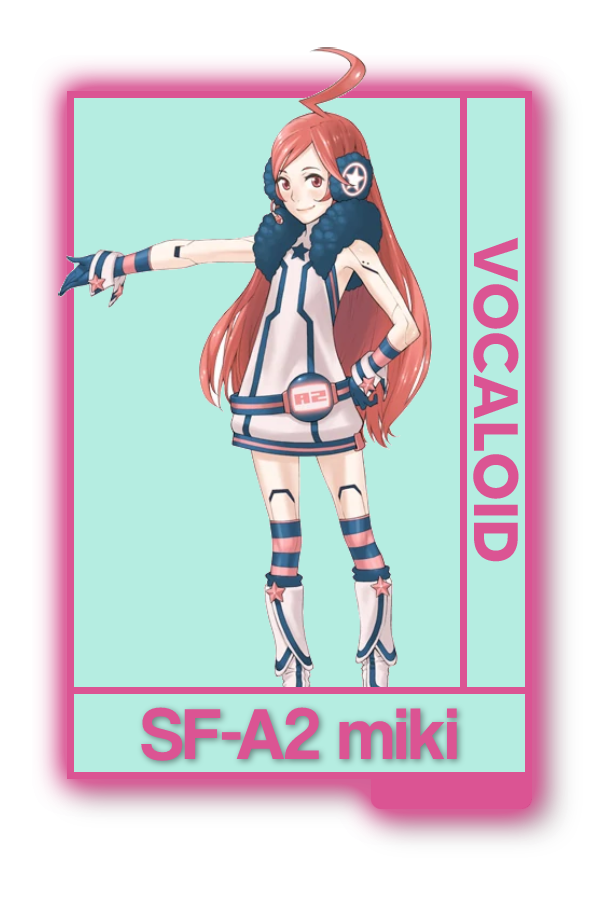
<style>
.page{position:relative;width:600px;height:900px;background:#b5ede1}
.page>*{position:absolute;margin:0}
.t1{font:62.5px "MADETOMMY-Bold";color:#db5493}
.t2{font:75px "CoolveticaRg-Regular";color:#db5493}
</style>
<div class="page">
<p class="t1" style="left:473px;top:237px;width:46px;height:325px;rotate:90deg">VOCALOID</p>
<p class="t2" style="left:141px;top:707px;width:316px;height:54px">SF-A2 miki</p>
</div>
